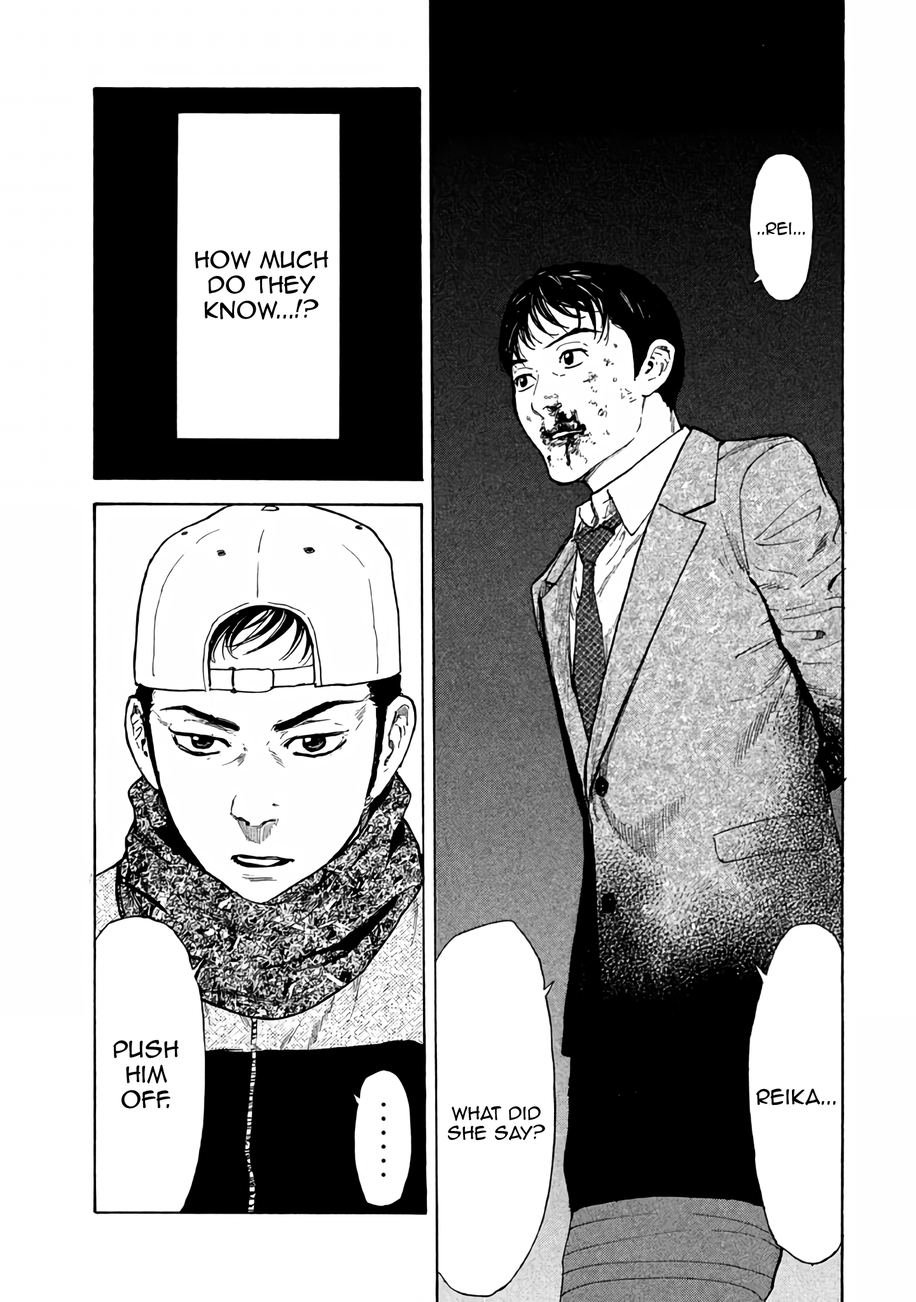
<style>
.page{position:relative;width:916px;height:1302px;background:#ffffff}
.page>*{position:absolute;margin:0}
.t1{font:15.3px "AnimeAce2.0BB";color:#000000}
.t2{font:21px "AnimeAce2.0BB";color:#000000}
.t3{font:19.1px "AnimeAce2.0BB";color:#000000}
.t4{font:16.5px "AnimeAce2.0BB";color:#000000}
</style>
<div class="page">
<p class="t1" style="left:757px;top:222px;width:48px;height:13px">..Rei...</p>
<p class="t2" style="left:195px;top:250px;width:133px;height:70px;text-align:center">How much <br>do they know...!?</p>
<p class="t2" style="left:113px;top:1040px;width:66px;height:69px;text-align:center">Push him off.</p>
<p class="t3" style="left:756px;top:1089px;width:80px;height:17px">Reika...</p>
<p class="t4" style="left:448px;top:1106px;width:97px;height:35px;text-align:center">What did she say?</p>
</div>
